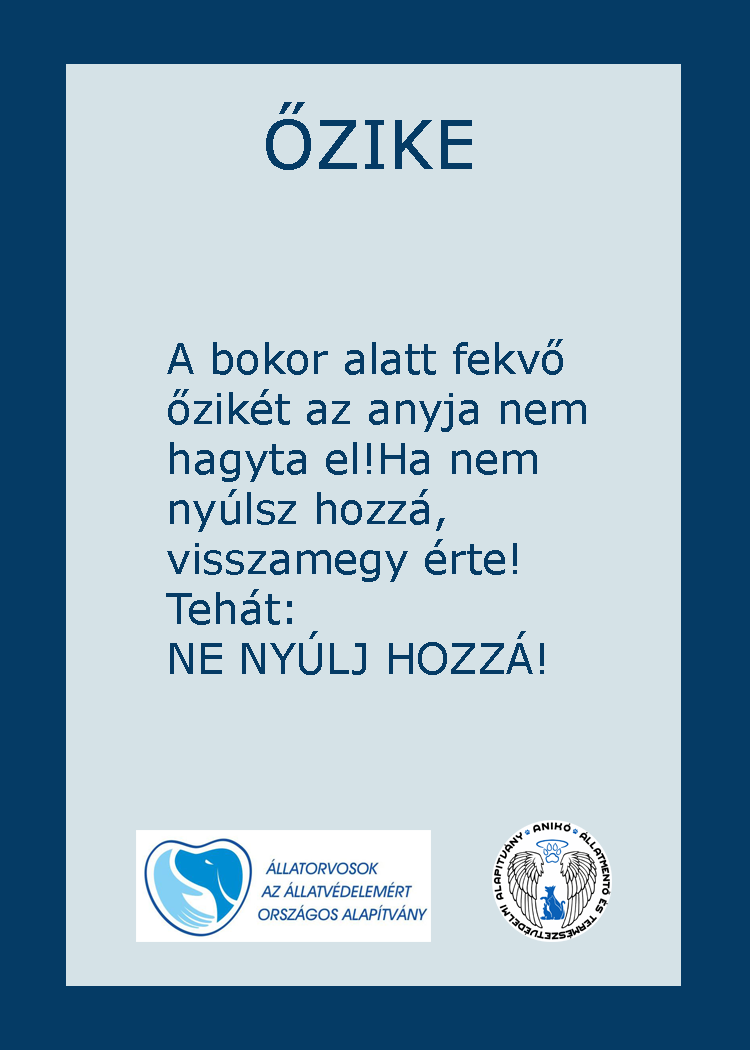
<style>
.page{position:relative;width:750px;height:1050px;background:#d5e2e7}
.page>*{position:absolute;margin:0}
.t1{font:66.7px "Verdana";color:#053b65}
.t2{font:66.7px "GravitateBRK";color:#053b65}
.t3{font:41.7px "Verdana";color:#053b65}
</style>
<div class="page">
<p class="t1" style="left:266px;top:102px;width:206px;height:68px"><span class="t2">         </span>ŐZIKE</p>
<p class="t3" style="left:166px;top:339px;width:420px;height:336px">A bokor alatt fekvő<br>őzikét az anyja nem <br>hagyta el!Ha nem <br>nyúlsz hozzá,<br>visszamegy érte!<br>Tehát:<br>NE NYÚLJ HOZZÁ!</p>
</div>
